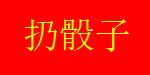
<style>
.page{position:relative;width:150px;height:75px;background:#ff0000}
.page>*{position:absolute;margin:0}
.t1{font:36px "SimSun";color:#ffff00}
</style>
<div class="page">
<p class="t1" style="left:24px;top:19px;width:106px;height:33px">扔骰子</p>
</div>
